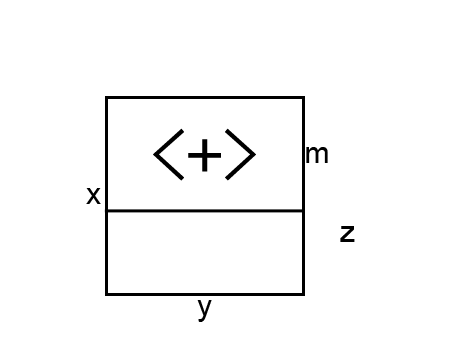
<style>
.page{position:relative;width:454px;height:340px;background:#ffffff}
.page>*{position:absolute;margin:0}
.t1{font:72px "SimHei";color:#000000}
.t2{font:30px "ArialMT";color:#000000}
</style>
<div class="page">
<p class="t1" style="left:153px;top:128px;width:103px;height:53px;rotate:180deg">&lt;+&gt;</p>
<p class="t2" style="left:306px;top:147px;width:22px;height:16px">m</p>
<p class="t2" style="left:86px;top:188px;width:15px;height:16px">x</p>
<p class="t2" style="left:340px;top:226px;width:15px;height:16px">z</p>
<p class="t2" style="left:197px;top:300px;width:15px;height:22px">y</p>
</div>
